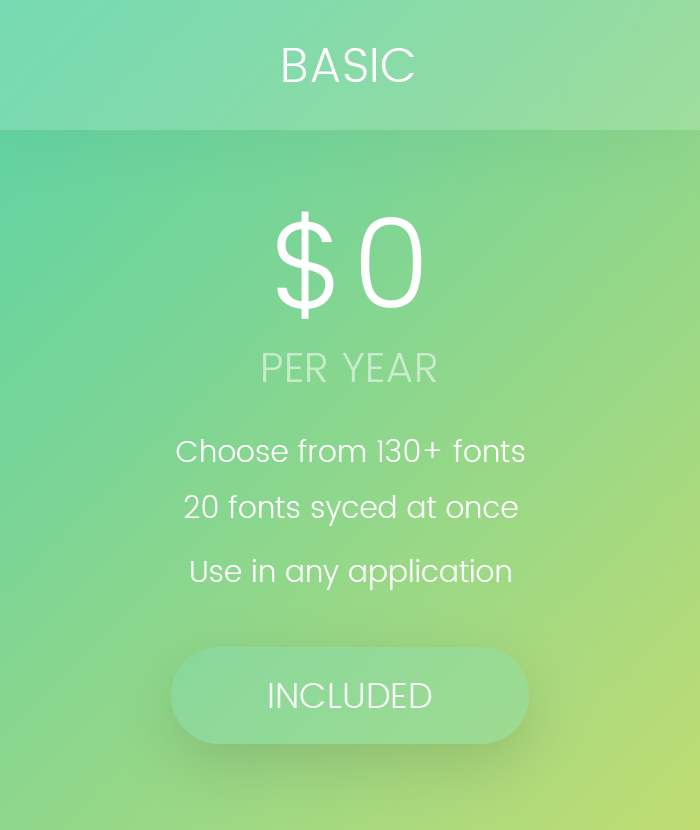
<style>
.page{position:relative;width:700px;height:830px}
.page>*{position:absolute;margin:0}
.t1{font:48px "Poppins-Light";color:#ffffff}
.t2{font:124px "Poppins-Light";color:#ffffff}
.t3{font:42px "Poppins-Light";color:#c8ebcc}
.t4{font:30px "Poppins-Light";color:#ffffff}
.t5{font:36px "Poppins-Light";color:#f7f7f7}
</style>
<div class="page">
<p class="t1" style="left:283px;top:48px;width:131px;height:34px">BASIC</p>
<p class="t2" style="left:277px;top:211px;width:145px;height:108px">$0</p>
<p class="t3" style="left:263px;top:353px;width:174px;height:29px">PER YEAR</p>
<p class="t4" style="left:176px;top:439px;width:349px;height:23px">Choose from 130+ fonts</p>
<p class="t4" style="left:184px;top:495px;width:334px;height:31px">20 fonts syced at once</p>
<p class="t4" style="left:191px;top:559px;width:320px;height:31px">Use in any application</p>
<p class="t5" style="left:269px;top:683px;width:163px;height:25px">INCLUDED</p>
</div>
